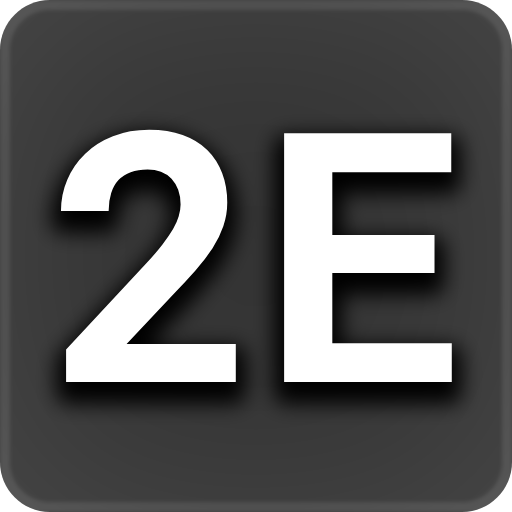
<style>
.page{position:relative;width:512px;height:512px}
.page>*{position:absolute;margin:0}
.t1{font:350px "RobotoMono-Bold";color:#ffffff}
</style>
<div class="page">
<p class="t1" style="left:60px;top:129px;width:392px;height:253px">2E</p>
</div>
